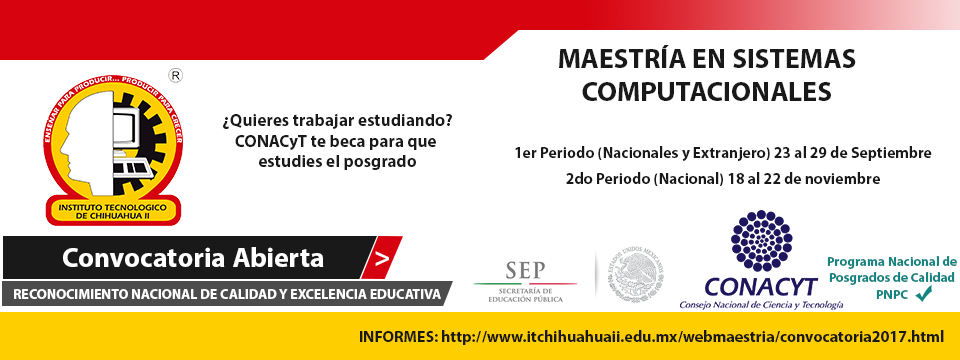
<style>
.page{position:relative;width:960px;height:360px;background:#ffffff}
.page>*{position:absolute;margin:0}
.t1{font:27.8px "MyriadPro-Bold";color:#191919}
.t2{font:17.1px "MyriadPro-Bold";color:#191919}
.t3{font:15.6px "MyriadPro-Bold";color:#191919}
.t4{font:27.8px "MyriadPro-Bold";color:#ffffff}
.t5{font:13.4px "MyriadPro-Bold";color:#168581}
.t6{font:13.9px "MyriadPro-Bold";color:#ffffff}
</style>
<div class="page">
<p class="t1" style="left:559px;top:45px;width:297px;height:56px;text-align:center">MAESTRÍA EN SISTEMAS<br>COMPUTACIONALES</p>
<p class="t2" style="left:223px;top:114px;width:229px;height:56px;text-align:center">¿Quieres trabajar estudiando?<br>CONACyT te beca para que <br>estudies el posgrado</p>
<p class="t3" style="left:515px;top:146px;width:417px;height:15px">1er Periodo (Nacionales y Extranjero) 23 al 29 de Septiembre</p>
<p class="t3" style="left:566px;top:172px;width:314px;height:14px">2do Periodo (Nacional) 18 al 22 de noviembre</p>
<p class="t4" style="left:63px;top:247px;width:261px;height:20px">Convocatoria Abierta</p>
<p class="t4" style="left:375px;top:251px;width:14px;height:15px">&gt;</p>
<p class="t5" style="left:827px;top:256px;width:130px;height:43px;text-align:center">Programa Nacional de<br>Posgrados de Calidad<br>PNPC</p>
<p class="t6" style="left:14px;top:289px;width:427px;height:10px">RECONOCIMIENTO NACIONAL DE CALIDAD Y EXCELENCIA EDUCATIVA</p>
<p class="t3" style="left:360px;top:330px;width:584px;height:15px">INFORMES: http://www.itchihuahuaii.edu.mx/webmaestria/convocatoria2017.html</p>
</div>
